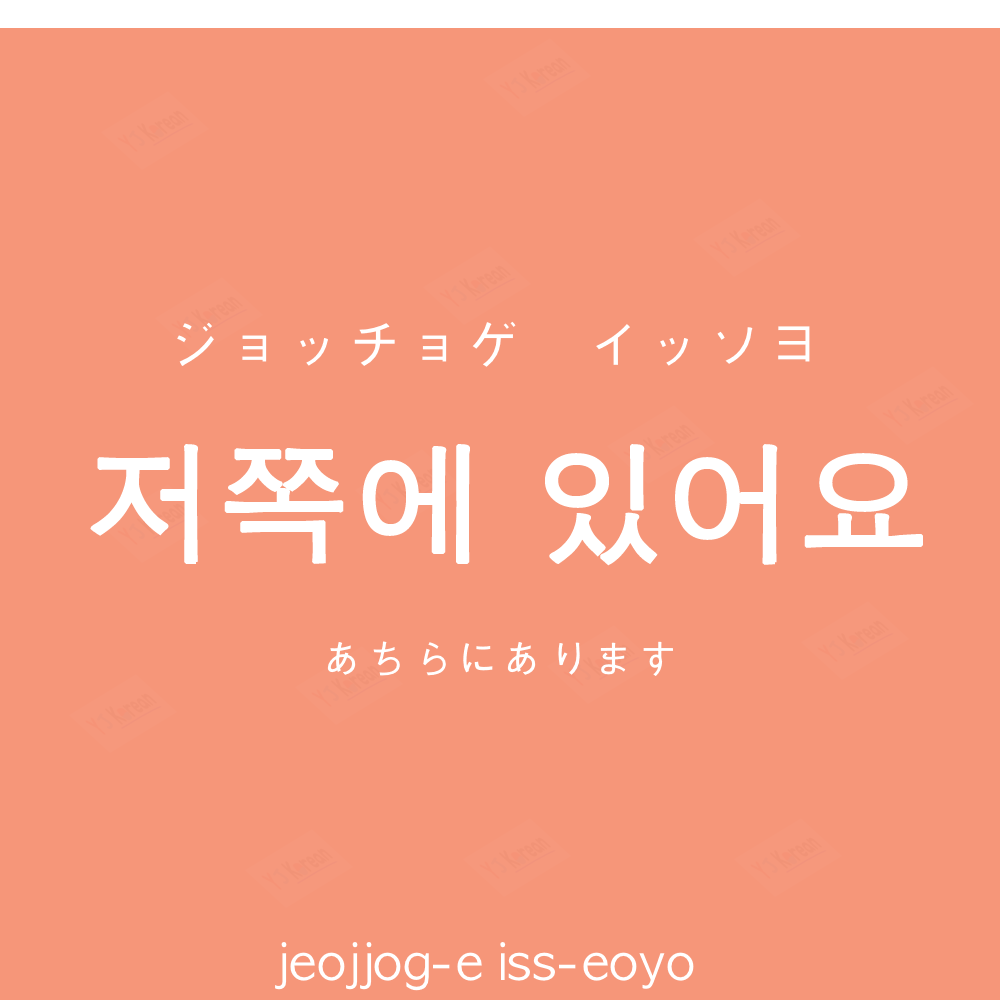
<style>
.page{position:relative;width:1000px;height:1000px;background:#f69679}
.page>*{position:absolute;margin:0}
.t1{font:60px "AppleGothic";color:#ffffff}
.t2{font:130px "AppleGothic";color:#ffffff;font-weight:bold}
.t3{font:45px "AppleGothic";color:#ffffff}
.t4{font:50px "AppleGothic";color:#ffffff}
</style>
<div class="page">
<p class="t1" style="left:177px;top:321px;width:633px;height:46px">ジョッチョゲ　イッソヨ</p>
<p class="t2" style="left:90px;top:444px;width:833px;height:122px">저쪽에 있어요</p>
<p class="t3" style="left:327px;top:641px;width:346px;height:35px">あちらにあります</p>
<p class="t4" style="left:275px;top:942px;width:419px;height:49px">jeojjog-e iss-eoyo</p>
</div>
